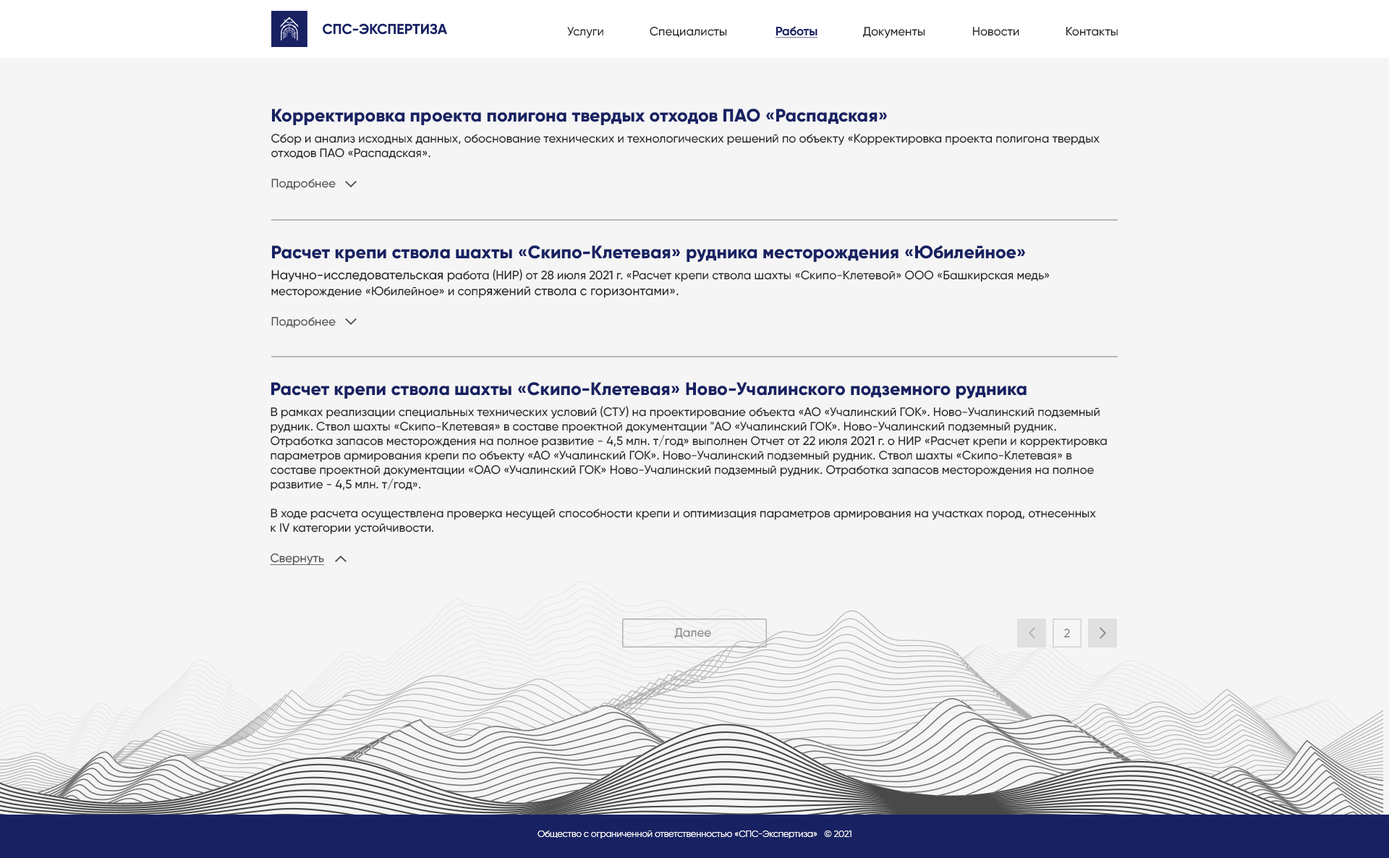
<style>
.page{position:relative;width:1389px;height:858px;background:#f5f5f5}
.page>*{position:absolute;margin:0}
.t1{font:12.1px "Gilroy-Medium";color:#212121}
.t2{font:12.1px "Gilroy-Bold";color:#182263;text-decoration:underline}
.t3{font:12.1px "Gilroy-Medium";color:#212121;text-transform:uppercase}
.t4{font:18.1px "Gilroy-ExtraBold";color:#182263}
.t5{font:18.1px/21.7px "Gilroy-ExtraBold";color:#182263}
.t6{font:18.1px/21.1px "Gilroy-ExtraBold";color:#182263}
.t7{font:12.1px/21.1px "Gilroy-Medium";color:#212121}
.t8{font:12.1px "Gilroy-Medium";color:#505050}
.t9{font:13px/21.1px "Gilroy-Medium";color:#212121}
.t10{font:13px "Gilroy-Medium";color:#212121}
.t11{font:18.1px/24.1px "Gilroy-ExtraBold";color:#182263}
.t12{font:12.1px "Gilroy-Medium";color:#505050;text-decoration:underline}
.t13{font:12.1px "Gilroy-Medium";color:#898989}
.t14{font:9px "Gilroy-Regular";color:#ffffff}
</style>
<div class="page">
<p class="t1" style="left:567px;top:27px;width:37px;height:11px">Услуги</p>
<p class="t1" style="left:650px;top:26px;width:77px;height:12px">Специалисты</p>
<p class="t2" style="left:775px;top:26px;width:43px;height:12px">Работы</p>
<p class="t1" style="left:863px;top:27px;width:63px;height:11px"><span class="t3">д</span>окументы</p>
<p class="t1" style="left:973px;top:27px;width:47px;height:9px"><span class="t3">н</span>овости</p>
<p class="t1" style="left:1066px;top:27px;width:52px;height:9px"><span class="t3">к</span>онтакты</p>
<p class="t1" style="left:271px;top:109px;width:829px;height:81px"><span class="t4">Коррек</span><span class="t5">тировка проекта поли</span><span class="t6">гона твердых отходов ПАО «Распадская»<br></span><span class="t7">Сбор и анализ исходных данных, обоснован</span>ие технических и технологических решений по объекту «Корректировка проекта полигона твердых <br>отходов ПАО «Распадская».<br><br><span class="t8">Подробнее</span></p>
<p class="t1" style="left:271px;top:245px;width:778px;height:84px"><span class="t4">Расче</span><span class="t6">т крепи ствола шахты «Скипо-Клетевая» рудника месторождения «Юбилейное»<br></span><span class="t9">Научно-иссл</span><span class="t10">едовательская р</span>абота (НИР) от 28 июля 2021 г. «Расчет крепи ствола шахты «Скипо-Клетевой» ООО «Башкирская медь»<br>месторождение «Юбилейное» и соп<span class="t10">ряжений ствола с горизонтами».<br><br></span><span class="t8">Подробнее</span></p>
<p class="t1" style="left:270px;top:382px;width:837px;height:183px"><span class="t11">Расч</span><span class="t6">ет крепи ствола шахты «Скипо-Клетевая» Ново-Учалинского подземного рудника<br></span><span class="t7">В рамках реализации специальных технических условий (СТУ) на проектирование объекта </span>«<span class="t7">АО </span>«<span class="t7">Учалинский ГОК</span>»<span class="t7">. Ново-Учалинский </span>подземный <br>рудник. Ствол шахты «Скипо-Клетевая» в составе проектной документации "АО «Учалинский ГОК». Ново-Учалинский подземный рудник. <br>Отработка запасов месторождения на полное развитие - 4,5 млн. т/год» выполнен Отчет от 22 июля 2021 г. о НИР «Расчет крепи и корректировка <br>параметров армирования крепи по объекту «АО «Учалинский ГОК». Ново-Учалинский подземный рудник. Ствол шахты «Скипо-Клетевая» в <br>составе проектной документации «ОАО «Учалинский ГОК» Ново-Учалинский подземный рудник. Отработка запасов месторождения на полное <br>развитие - 4,5 млн. т/год».<br><br>В ходе расчета осуществлена проверка несущей способности крепи и оптимизация параметров армирования на участках пород, отнесенных <br>к IV категории устойчивости.<br><br><span class="t12">Свернуть</span></p>
<p class="t13" style="left:674px;top:628px;width:37px;height:11px">Далее</p>
<p class="t13" style="left:1064px;top:628px;width:6px;height:10px">2</p>
<p class="t14" style="left:538px;top:830px;width:314px;height:9px">Общество с ограниченной ответственностью «СПС-Экспертиза»   © 2021</p>
</div>
